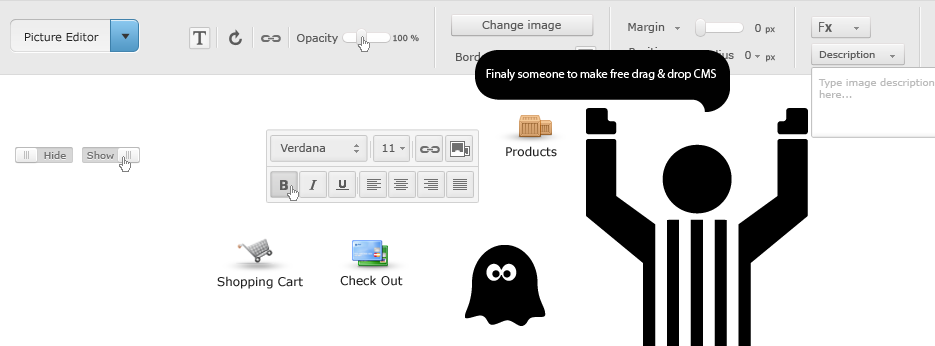
<style>
.page{position:relative;width:935px;height:346px;background:#ffffff}
.page>*{position:absolute;margin:0}
.t1{font:11px "Verdana";color:#5a5a5a}
.t2{font:8px "Verdana";color:#5a5a5a}
.t3{font:13.1px "KozGoPr6N-ExtraLight";color:#5a5a5a}
.t4{font:13.1px "AdobeGothicStd-Bold";color:#5a5a5a}
.t5{font:11px "Verdana";color:#212121}
.t6{font:11px "Verdana";color:#010101}
.t7{font:10px "Verdana";color:#5e5e5e}
.t8{font:12px "MyriadPro-Regular";color:#ffffff}
.t9{font:10px/12px "Verdana";color:#bababa}
.t10{font:12px "Verdana";color:#212121}
.t11{font:10px "Verdana";color:#6f6f6f}
</style>
<div class="page">
<p class="t1" style="left:482px;top:20px;width:79px;height:11px">Change image</p>
<p class="t1" style="left:628px;top:22px;width:37px;height:11px">Margin</p>
<p class="t2" style="left:755px;top:24px;width:20px;height:10px"><span class="t1">0 </span>px</p>
<p class="t3" style="left:819px;top:22px;width:13px;height:10px">F<span class="t4">x</span></p>
<p class="t5" style="left:25px;top:32px;width:74px;height:10px">Picture Editor</p>
<p class="t1" style="left:297px;top:33px;width:41px;height:11px">Opacity</p>
<p class="t2" style="left:393px;top:34px;width:26px;height:8px">100 %</p>
<p class="t1" style="left:456px;top:52px;width:37px;height:9px">Border</p>
<p class="t6" style="left:629px;top:47px;width:42px;height:9px">Position</p>
<p class="t1" style="left:745px;top:51px;width:6px;height:8px">0</p>
<p class="t7" style="left:819px;top:51px;width:56px;height:9px">Description</p>
<p class="t2" style="left:766px;top:55px;width:9px;height:7px">px</p>
<p class="t8" style="left:486px;top:69px;width:230px;height:12px">Finaly someone to make free drag &amp; drop CMS</p>
<p class="t9" style="left:818px;top:78px;width:117px;height:20px">Type image description <br>here...</p>
<p class="t1" style="left:280px;top:143px;width:45px;height:9px">Verdana</p>
<p class="t1" style="left:382px;top:144px;width:13px;height:8px">11</p>
<p class="t10" style="left:506px;top:146px;width:51px;height:11px">Products</p>
<p class="t11" style="left:44px;top:151px;width:22px;height:8px">Hide</p>
<p class="t11" style="left:87px;top:151px;width:27px;height:8px">Show</p>
<p class="t10" style="left:217px;top:276px;width:86px;height:13px">Shopping Cart</p>
<p class="t10" style="left:340px;top:275px;width:63px;height:11px">Check Out</p>
</div>
